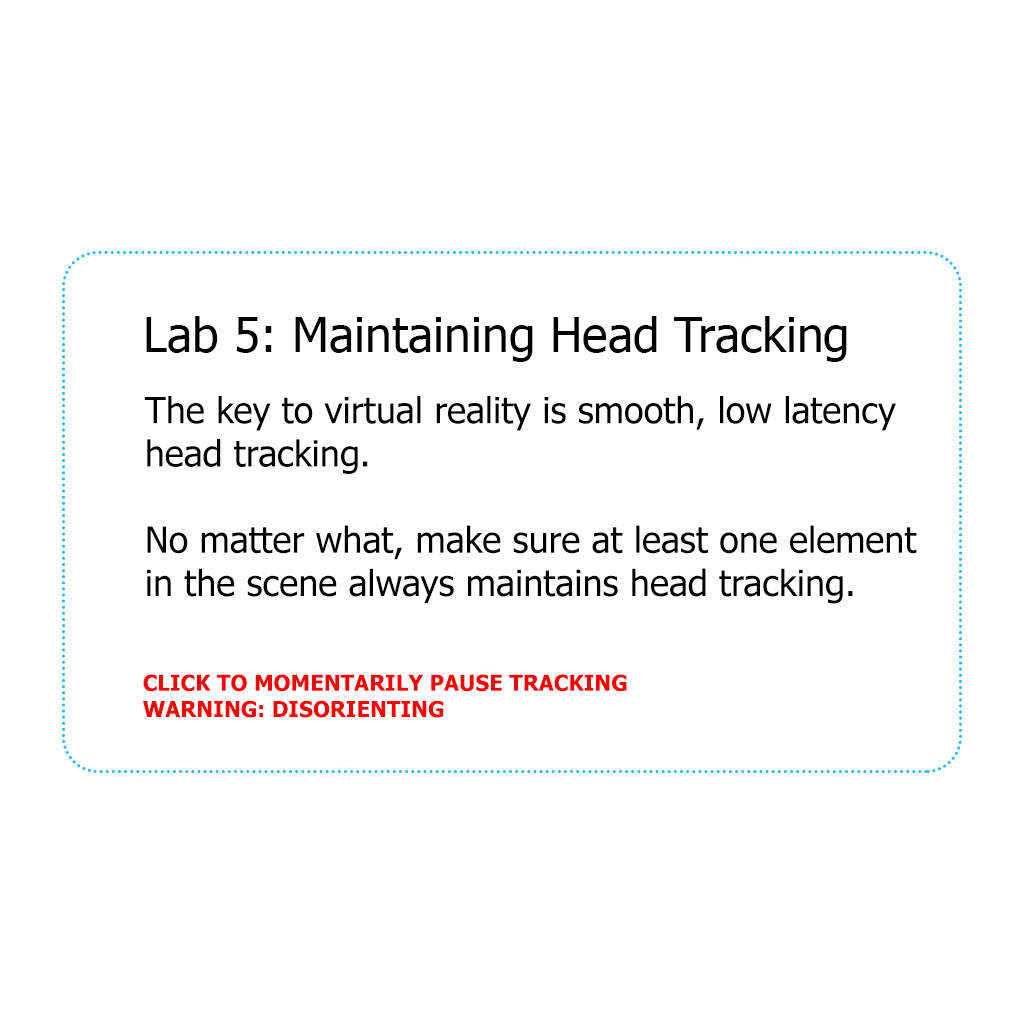
<style>
.page{position:relative;width:1024px;height:1024px;background:#ffffff}
.page>*{position:absolute;margin:0}
.t1{font:48px "Tahoma";color:#000000}
.t2{font:36px "Tahoma";color:#000000}
.t3{font:22px "Tahoma-Bold";color:#ff0000}
</style>
<div class="page">
<p class="t1" style="left:146px;top:316px;width:701px;height:46px">Lab 5: Maintaining Head Tracking</p>
<p class="t2" style="left:144px;top:396px;width:773px;height:208px">The key to virtual reality is smooth, low latency head tracking.<br><br>No matter what, make sure at least one element in the scene always maintains head tracking.</p>
<p class="t3" style="left:143px;top:674px;width:484px;height:44px">CLICK TO MOMENTARILY PAUSE TRACKING<br>WARNING: DISORIENTING</p>
</div>
